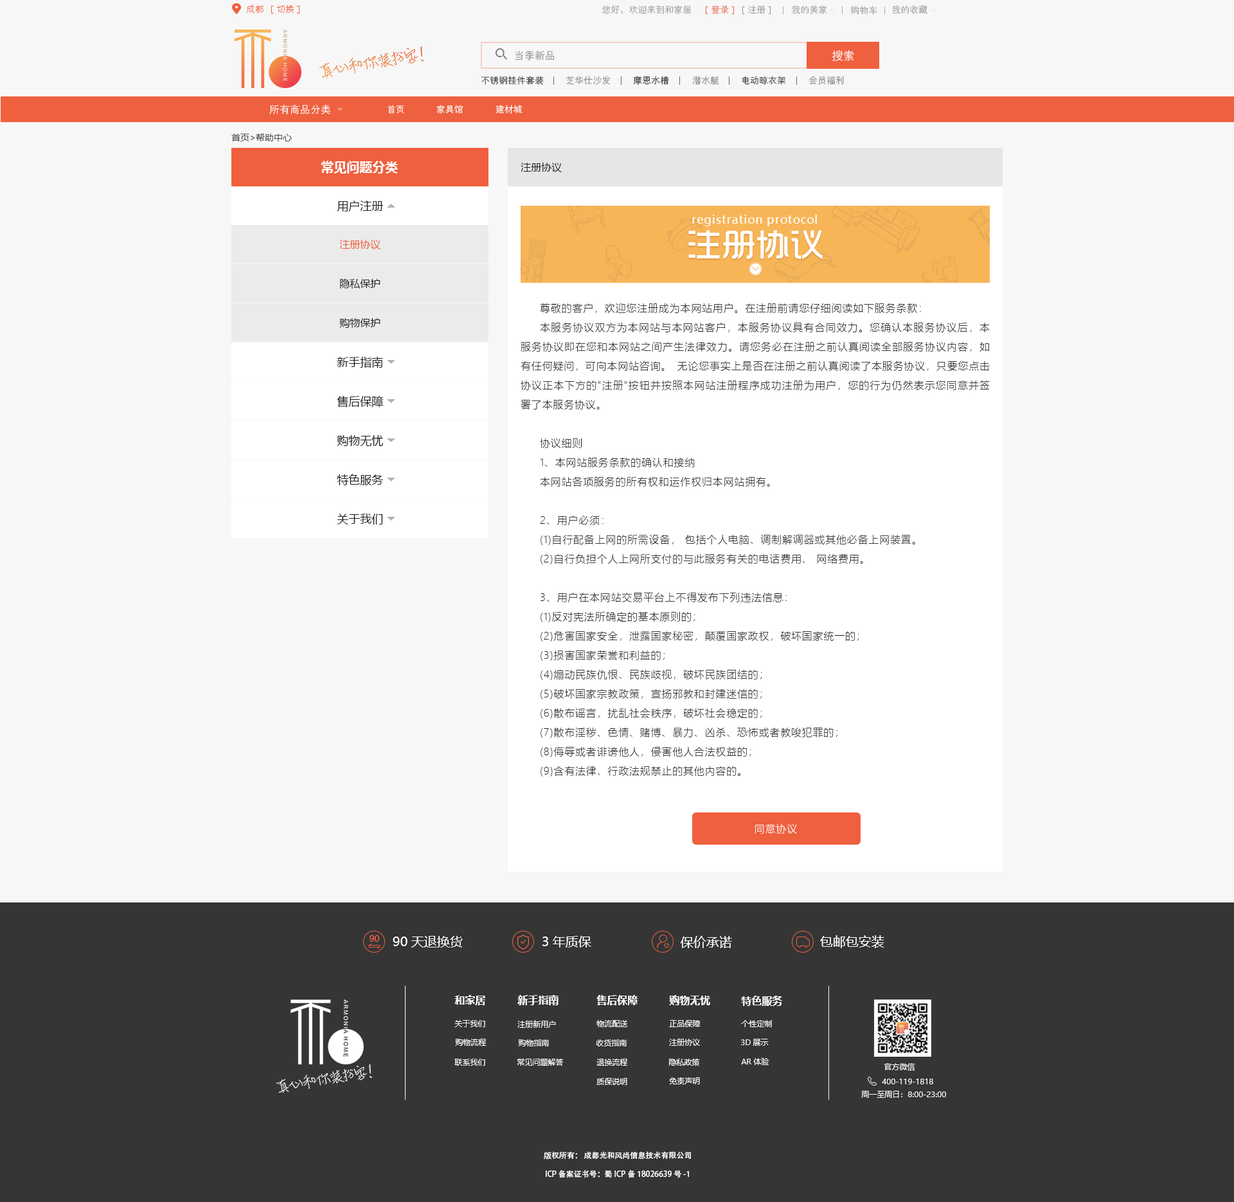
<style>
.page{position:relative;width:1234px;height:1202px;background:#f7f7f7}
.page>*{position:absolute;margin:0}
.t1{font:9px "FZXH1JW--GB1-0";color:#ef603e}
.t2{font:9px "FZXH1JW--GB1-0";color:#999999}
.t3{font:9px "FZXH1JW--GB1-0"}
.t4{font:10.3px "FZXH1JW--GB1-0";color:#808080}
.t5{font:11.6px "FZXH1JW--GB1-0";color:#ffffff}
.t6{font:9px "FZXH1JW--GB1-0";color:#808080}
.t7{font:9px "FZXH1JW--GB1-0";color:#1f1f1f}
.t8{font:10.3px "FZXH1JW--GB1-0";color:#ffffff}
.t9{font:9px "FZXH1JW--GB1-0";color:#ffffff}
.t10{font:9px "MicrosoftYaHei";color:#4d4d4d}
.t11{font:12.9px "MicrosoftYaHei-Bold";color:#ffffff}
.t12{font:10.3px "MicrosoftYaHei";color:#1f1f1f}
.t13{font:11.6px "MicrosoftYaHei";color:#1f1f1f}
.t14{font:11.6px "MicrosoftYaHei";letter-spacing:0.05em;color:#ffffff}
.t15{font:34.3px "TRENDS";color:#ffffff}
.t16{font:10.3px "MicrosoftYaHei";color:#ef603e}
.t17{font:10.3px/19.3px "MicrosoftYaHeiLight";letter-spacing:0.05em;color:#1f1f1f}
.t18{font:10.3px "MicrosoftYaHeiLight";letter-spacing:0.05em;color:#ffffff}
.t19{font:9.3px "FZHTK--GBK1-0";color:#ef603e}
.t20{font:12.9px "MicrosoftYaHei";color:#ffffff}
.t21{font:12.9px "MicrosoftYaHei";color:#fefefe}
.t22{font:10.3px "MicrosoftYaHei-Bold";color:#ffffff}
.t23{font:10.3px "MicrosoftYaHei-Bold";color:#fffefe}
.t24{font:7.7px "MicrosoftYaHei";color:#ffffff}
.t25{font:7.7px "AdobeHeitiStd-Regular";color:#ffffff}
</style>
<div class="page">
<p class="t1" style="left:246px;top:4px;width:18px;height:9px">成都</p>
<p class="t1" style="left:276px;top:5px;width:18px;height:8px">切换</p>
<p class="t2" style="left:602px;top:5px;width:90px;height:9px">您好，欢迎来到和家居</p>
<p class="t3" style="left:712px;top:6px;width:17px;height:8px">登录</p>
<p class="t2" style="left:748px;top:5px;width:18px;height:9px">注册</p>
<p class="t2" style="left:792px;top:5px;width:35px;height:9px">我的美家</p>
<p class="t2" style="left:851px;top:6px;width:27px;height:9px">购物车</p>
<p class="t2" style="left:892px;top:5px;width:36px;height:9px">我的收藏</p>
<p class="t4" style="left:515px;top:51px;width:40px;height:9px">当季新品</p>
<p class="t5" style="left:832px;top:50px;width:22px;height:11px">搜索</p>
<p class="t3" style="left:482px;top:76px;width:62px;height:9px">不锈钢挂件套装</p>
<p class="t6" style="left:566px;top:76px;width:45px;height:9px">芝华仕沙发</p>
<p class="t7" style="left:633px;top:76px;width:36px;height:9px">摩恩水槽</p>
<p class="t6" style="left:692px;top:76px;width:27px;height:9px">潜水艇</p>
<p class="t3" style="left:742px;top:76px;width:44px;height:9px">电动晾衣架</p>
<p class="t6" style="left:809px;top:76px;width:35px;height:9px">会员福利</p>
<p class="t8" style="left:269px;top:104px;width:62px;height:10px">所有商品分类</p>
<p class="t9" style="left:387px;top:105px;width:17px;height:9px">首页</p>
<p class="t9" style="left:437px;top:105px;width:27px;height:9px">家具馆</p>
<p class="t9" style="left:496px;top:105px;width:27px;height:9px">建材城</p>
<p class="t10" style="left:231px;top:134px;width:61px;height:7px">首页&gt;帮助中心</p>
<p class="t11" style="left:321px;top:161px;width:77px;height:13px">常见问题分类</p>
<p class="t12" style="left:521px;top:163px;width:41px;height:9px">注册协议</p>
<p class="t13" style="left:337px;top:201px;width:46px;height:11px">用户注册</p>
<p class="t14" style="left:692px;top:215px;width:125px;height:11px">registration protocol</p>
<p class="t15" style="left:688px;top:230px;width:135px;height:29px">注册协议</p>
<p class="t16" style="left:339px;top:240px;width:42px;height:9px">注册协议</p>
<p class="t12" style="left:340px;top:278px;width:41px;height:11px">隐私保护</p>
<p class="t17" style="left:521px;top:303px;width:469px;height:474px;text-align:justify">尊敬的客户，欢迎您注册成为本网站用户。在注册前请您仔细阅读如下服务条款：<br>本服务协议双方为本网站与本网站客户，本服务协议具有合同效力。您确认本服务协议后，本服务协议即在您和本网站之间产生法律效力。请您务必在注册之前认真阅读全部服务协议内容，如有任何疑问，可向本网站咨询。 无论您事实上是否在注册之前认真阅读了本服务协议，只要您点击协议正本下方的"注册"按钮并按照本网站注册程序成功注册为用户，您的行为仍然表示您同意并签署了本服务协议。<br><br>协议细则<br>1、本网站服务条款的确认和接纳<br>本网站各项服务的所有权和运作权归本网站拥有。<br><br>2、用户必须：<br>(1)自行配备上网的所需设备， 包括个人电脑、调制解调器或其他必备上网装置。<br>(2)自行负担个人上网所支付的与此服务有关的电话费用、 网络费用。<br><br>3、用户在本网站交易平台上不得发布下列违法信息：<br>(1)反对宪法所确定的基本原则的；<br>(2)危害国家安全，泄露国家秘密，颠覆国家政权，破坏国家统一的；<br>(3)损害国家荣誉和利益的；<br>(4)煽动民族仇恨、民族歧视，破坏民族团结的；<br>(5)破坏国家宗教政策，宣扬邪教和封建迷信的；<br>(6)散布谣言，扰乱社会秩序，破坏社会稳定的；<br>(7)散布淫秽、色情、赌博、暴力、凶杀、恐怖或者教唆犯罪的；<br>(8)侮辱或者诽谤他人，侵害他人合法权益的；<br>(9)含有法律、行政法规禁止的其他内容的。</p>
<p class="t12" style="left:339px;top:318px;width:42px;height:10px">购物保护</p>
<p class="t13" style="left:337px;top:357px;width:46px;height:11px">新手指南</p>
<p class="t13" style="left:337px;top:395px;width:47px;height:13px">售后保障</p>
<p class="t13" style="left:337px;top:435px;width:46px;height:11px">购物无忧</p>
<p class="t13" style="left:337px;top:474px;width:46px;height:11px">特色服务</p>
<p class="t13" style="left:337px;top:514px;width:46px;height:11px">关于我们</p>
<p class="t18" style="left:755px;top:824px;width:42px;height:10px">同意协议</p>
<p class="t19" style="left:370px;top:935px;width:10px;height:7px">90</p>
<p class="t20" style="left:393px;top:936px;width:70px;height:12px">90天退换货</p>
<p class="t21" style="left:543px;top:936px;width:48px;height:12px">3年质保</p>
<p class="t20" style="left:681px;top:936px;width:51px;height:12px">保价承诺</p>
<p class="t20" style="left:820px;top:935px;width:65px;height:13px">包邮包安装</p>
<p class="t22" style="left:455px;top:995px;width:30px;height:10px">和家居</p>
<p class="t22" style="left:518px;top:995px;width:41px;height:10px">新手指南</p>
<p class="t22" style="left:597px;top:995px;width:41px;height:10px">售后保障</p>
<p class="t22" style="left:669px;top:995px;width:41px;height:10px">购物无忧</p>
<p class="t23" style="left:741px;top:996px;width:41px;height:10px">特色服务</p>
<p class="t24" style="left:455px;top:1020px;width:30px;height:7px">关于我们</p>
<p class="t24" style="left:518px;top:1020px;width:38px;height:8px">注册新用户</p>
<p class="t24" style="left:597px;top:1020px;width:30px;height:7px">物流配送</p>
<p class="t24" style="left:669px;top:1020px;width:32px;height:7px">正品保障</p>
<p class="t24" style="left:741px;top:1020px;width:31px;height:7px">个性定制</p>
<p class="t24" style="left:455px;top:1039px;width:32px;height:7px">购物流程</p>
<p class="t24" style="left:518px;top:1040px;width:31px;height:7px">购物指南</p>
<p class="t24" style="left:596px;top:1040px;width:31px;height:7px">收货指南</p>
<p class="t24" style="left:669px;top:1039px;width:31px;height:7px">注册协议</p>
<p class="t24" style="left:741px;top:1039px;width:28px;height:7px">3D展示</p>
<p class="t24" style="left:455px;top:1059px;width:30px;height:7px">联系我们</p>
<p class="t24" style="left:518px;top:1059px;width:46px;height:7px">常见问题解答</p>
<p class="t24" style="left:597px;top:1059px;width:31px;height:7px">退换流程</p>
<p class="t24" style="left:669px;top:1059px;width:31px;height:7px">隐私政策</p>
<p class="t24" style="left:741px;top:1058px;width:29px;height:7px">AR体验</p>
<p class="t24" style="left:885px;top:1063px;width:30px;height:8px">官方微信</p>
<p class="t24" style="left:597px;top:1078px;width:30px;height:7px">质保说明</p>
<p class="t24" style="left:669px;top:1077px;width:31px;height:7px">免责声明</p>
<p class="t24" style="left:882px;top:1079px;width:51px;height:5px">400-119-1818</p>
<p class="t24" style="left:861px;top:1091px;width:85px;height:7px">周一至周日：8:00-23:00</p>
<p class="t25" style="left:544px;top:1151px;width:147px;height:9px">版权所有：  成都光和风尚信息技术有限公司</p>
<p class="t25" style="left:546px;top:1170px;width:143px;height:8px">ICP备案证书号：蜀ICP备18026639号-1</p>
</div>
